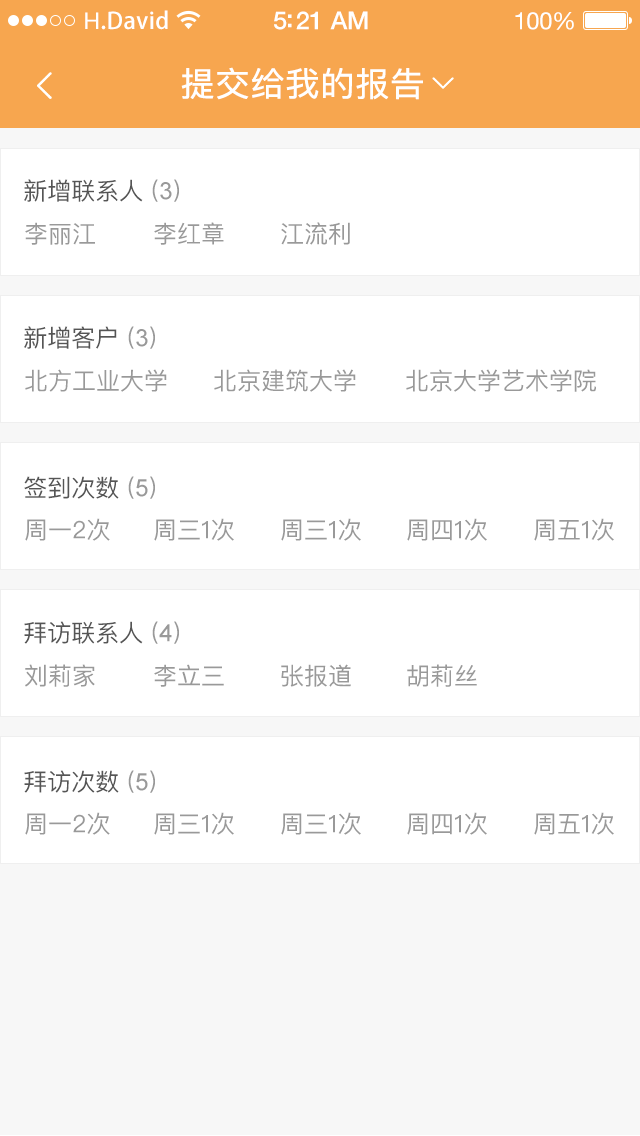
<style>
.page{position:relative;width:640px;height:1136px;background:#ffffff}
.page>*{position:absolute;margin:0}
.t1{font:23px "AdobeHeitiStd-Regular";letter-spacing:0.02em;color:#ffffff}
.t2{font:23px "HelveticaNeue";letter-spacing:0.02em;color:#ffffff}
.t3{font:25px "HelveticaNeue-Medium";letter-spacing:-0.02em;color:#ffffff}
.t4{font:24px "HelveticaNeue";letter-spacing:-0.02em;color:#ffffff}
.t5{font:33.5px "PingFangSC-Regular";color:#ffffff;font-weight:bold}
.t6{font:24px "PingFangSC-Regular";color:#555555}
.t7{font:24px "PingFangSC-Regular";color:#999999}
.t8{font:24px "ArialMT";color:#999999}
</style>
<div class="page">
<p class="t1" style="left:85px;top:10px;width:83px;height:20px"><span class="t2">H</span>.David</p>
<p class="t3" style="left:274px;top:11px;width:94px;height:19px">5:21 AM</p>
<p class="t4" style="left:515px;top:12px;width:59px;height:18px">100%</p>
<p class="t5" style="left:181px;top:67px;width:242px;height:33px">提交给我的报告</p>
<p class="t6" style="left:24px;top:179px;width:155px;height:23px">新增联系人 <span class="t7">(</span><span class="t8">3</span><span class="t7">)</span></p>
<p class="t7" style="left:25px;top:222px;width:70px;height:23px">李丽江</p>
<p class="t7" style="left:154px;top:222px;width:70px;height:23px">李红章</p>
<p class="t7" style="left:281px;top:222px;width:69px;height:23px">江流利</p>
<p class="t6" style="left:24px;top:326px;width:131px;height:23px">新增客户 <span class="t7">(</span><span class="t8">3</span><span class="t7">)</span></p>
<p class="t7" style="left:25px;top:369px;width:142px;height:23px">北方工业大学</p>
<p class="t7" style="left:214px;top:369px;width:142px;height:23px">北京建筑大学</p>
<p class="t7" style="left:406px;top:369px;width:190px;height:23px">北京大学艺术学院</p>
<p class="t6" style="left:24px;top:476px;width:131px;height:23px">签到次数 <span class="t7">(</span><span class="t8">5</span><span class="t7">)</span></p>
<p class="t7" style="left:25px;top:518px;width:85px;height:23px">周一2次</p>
<p class="t7" style="left:154px;top:518px;width:80px;height:23px">周三1次</p>
<p class="t7" style="left:281px;top:518px;width:80px;height:23px">周三1次</p>
<p class="t7" style="left:407px;top:518px;width:80px;height:23px">周四1次</p>
<p class="t7" style="left:534px;top:518px;width:80px;height:23px">周五1次</p>
<p class="t6" style="left:24px;top:621px;width:155px;height:23px">拜访联系人 <span class="t7">(</span><span class="t8">4</span><span class="t7">)</span></p>
<p class="t7" style="left:25px;top:664px;width:70px;height:23px">刘莉家</p>
<p class="t7" style="left:154px;top:664px;width:70px;height:23px">李立三</p>
<p class="t7" style="left:281px;top:664px;width:70px;height:23px">张报道</p>
<p class="t7" style="left:407px;top:664px;width:70px;height:23px">胡莉丝</p>
<p class="t6" style="left:24px;top:770px;width:131px;height:23px">拜访次数 <span class="t7">(</span><span class="t8">5</span><span class="t7">)</span></p>
<p class="t7" style="left:25px;top:812px;width:85px;height:23px">周一2次</p>
<p class="t7" style="left:154px;top:812px;width:80px;height:23px">周三1次</p>
<p class="t7" style="left:281px;top:812px;width:80px;height:23px">周三1次</p>
<p class="t7" style="left:407px;top:812px;width:80px;height:23px">周四1次</p>
<p class="t7" style="left:534px;top:812px;width:80px;height:23px">周五1次</p>
</div>
